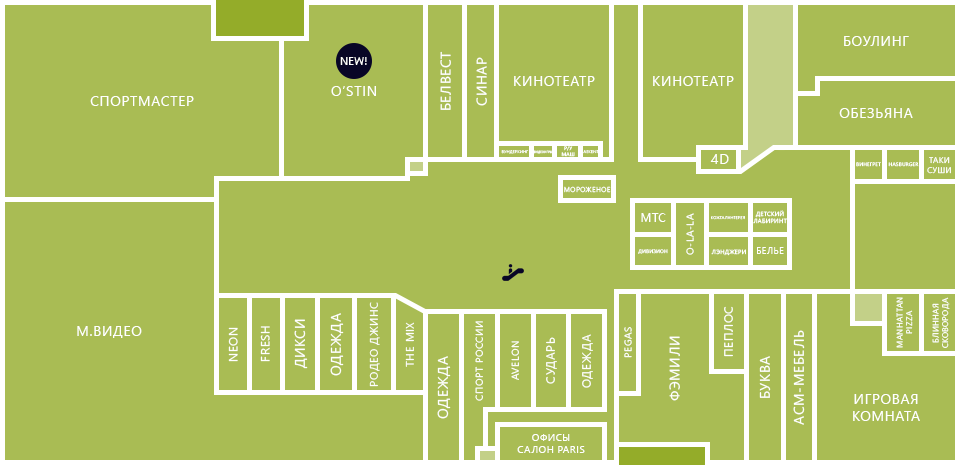
<style>
.page{position:relative;width:960px;height:465px;background:#a9bc54}
.page>*{position:absolute;margin:0}
.t1{font:14px "SegoeUI";letter-spacing:0.05em;color:#ffffff;text-transform:uppercase}
.t2{font:11px "SegoeUI";color:#ffffff;text-transform:uppercase}
.t3{font:4px "SegoeUI";letter-spacing:0.05em;color:#ffffff;text-transform:uppercase}
.t4{font:3px "SegoeUI";letter-spacing:0.05em;color:#ffffff;text-transform:uppercase}
.t5{font:5px "SegoeUI";letter-spacing:0.05em;color:#ffffff;text-transform:uppercase}
.t6{font:8px "SegoeUI";letter-spacing:0.05em;color:#ffffff;text-transform:uppercase}
.t7{font:7px "SegoeUI";letter-spacing:0.05em;color:#ffffff;text-transform:uppercase}
.t8{font:12px "SegoeUI";letter-spacing:0.05em;color:#ffffff;text-transform:uppercase}
.t9{font:10px "SegoeUI";letter-spacing:0.05em;color:#ffffff;text-transform:uppercase}
.t10{font:6px "SegoeUI";letter-spacing:0.05em;color:#ffffff;text-transform:uppercase}
.t11{font:9px "SegoeUI";letter-spacing:0.05em;color:#ffffff;text-transform:uppercase}
.t12{font:11px "SegoeUI";letter-spacing:0.05em;color:#ffffff;text-transform:uppercase}
</style>
<div class="page">
<p class="t1" style="left:844px;top:36px;width:65px;height:10px">Боулинг</p>
<p class="t1" style="left:440px;top:51px;width:11px;height:59px;rotate:-90deg">Белвест</p>
<p class="t2" style="left:340px;top:57px;width:27px;height:8px">New!</p>
<p class="t1" style="left:476px;top:57px;width:11px;height:49px;rotate:-90deg">синар</p>
<p class="t1" style="left:514px;top:76px;width:81px;height:10px">Кинотеатр</p>
<p class="t1" style="left:653px;top:76px;width:81px;height:10px">Кинотеатр</p>
<p class="t1" style="left:331px;top:86px;width:45px;height:10px">O’stin</p>
<p class="t1" style="left:90px;top:96px;width:104px;height:10px">спортмастер</p>
<p class="t1" style="left:839px;top:108px;width:74px;height:10px">Обезьяна</p>
<p class="t3" style="left:501px;top:150px;width:28px;height:4px">Вундеркинг</p>
<p class="t4" style="left:533px;top:150px;width:20px;height:4px">Видеоигры</p>
<p class="t5" style="left:561px;top:146px;width:14px;height:11px;text-align:center">р/у<br>маш</p>
<p class="t3" style="left:583px;top:150px;width:16px;height:4px">Askent</p>
<p class="t1" style="left:710px;top:154px;width:19px;height:10px">4d</p>
<p class="t6" style="left:927px;top:157px;width:24px;height:17px;text-align:center">Таки<br>суши</p>
<p class="t5" style="left:856px;top:162px;width:25px;height:5px">Винегрет</p>
<p class="t5" style="left:888px;top:162px;width:31px;height:5px">Hasburger</p>
<p class="t7" style="left:564px;top:186px;width:47px;height:7px">Мороженое</p>
<p class="t8" style="left:641px;top:213px;width:25px;height:9px">Мтс</p>
<p class="t9" style="left:686px;top:213px;width:8px;height:42px;rotate:-90deg">O-la-la</p>
<p class="t3" style="left:711px;top:216px;width:34px;height:4px">Кожгалантерея</p>
<p class="t10" style="left:753px;top:210px;width:34px;height:14px;text-align:center">Детский<br>лабиринт</p>
<p class="t5" style="left:638px;top:249px;width:30px;height:5px">Дивизион</p>
<p class="t10" style="left:711px;top:249px;width:35px;height:7px">Лэнджери</p>
<p class="t11" style="left:757px;top:247px;width:27px;height:7px">Белье</p>
<p class="t12" style="left:369px;top:302px;width:11px;height:85px;rotate:-90deg">Родео джинс</p>
<p class="t6" style="left:896px;top:297px;width:17px;height:51px;text-align:center;rotate:-90deg">Manhattan<br>pizza</p>
<p class="t6" style="left:932px;top:297px;width:18px;height:51px;text-align:center;rotate:-90deg">Блинная<br>сковорода</p>
<p class="t1" style="left:330px;top:313px;width:14px;height:63px;rotate:-90deg">Одежда</p>
<p class="t8" style="left:724px;top:306px;width:9px;height:51px;rotate:-90deg">Пеплос</p>
<p class="t1" style="left:77px;top:326px;width:65px;height:12px">М.видео</p>
<p class="t8" style="left:228px;top:327px;width:10px;height:35px;rotate:-90deg">Neon</p>
<p class="t8" style="left:260px;top:326px;width:10px;height:36px;rotate:-90deg">Fresh</p>
<p class="t1" style="left:294px;top:319px;width:14px;height:50px;rotate:-90deg">Дикси</p>
<p class="t12" style="left:405px;top:322px;width:9px;height:45px;rotate:-90deg">The mix</p>
<p class="t9" style="left:475px;top:321px;width:8px;height:80px;rotate:-90deg">Спорт России</p>
<p class="t9" style="left:624px;top:327px;width:8px;height:31px;rotate:-90deg">Pegas</p>
<p class="t9" style="left:511px;top:341px;width:8px;height:39px;rotate:-90deg">Avelon</p>
<p class="t8" style="left:546px;top:337px;width:11px;height:47px;rotate:-90deg">Сударь</p>
<p class="t8" style="left:582px;top:334px;width:11px;height:54px;rotate:-90deg">Одежда</p>
<p class="t1" style="left:669px;top:336px;width:11px;height:65px;rotate:-90deg">Фэмили</p>
<p class="t1" style="left:793px;top:330px;width:12px;height:95px;rotate:-90deg">аСМ-мебель</p>
<p class="t1" style="left:437px;top:356px;width:14px;height:63px;rotate:-90deg">Одежда</p>
<p class="t1" style="left:759px;top:356px;width:12px;height:42px;rotate:-90deg">Буква</p>
<p class="t1" style="left:853px;top:394px;width:67px;height:27px;text-align:center">Игровая<br>комната</p>
<p class="t9" style="left:517px;top:434px;width:68px;height:19px;text-align:center">Офисы<br>Салон Paris</p>
</div>
